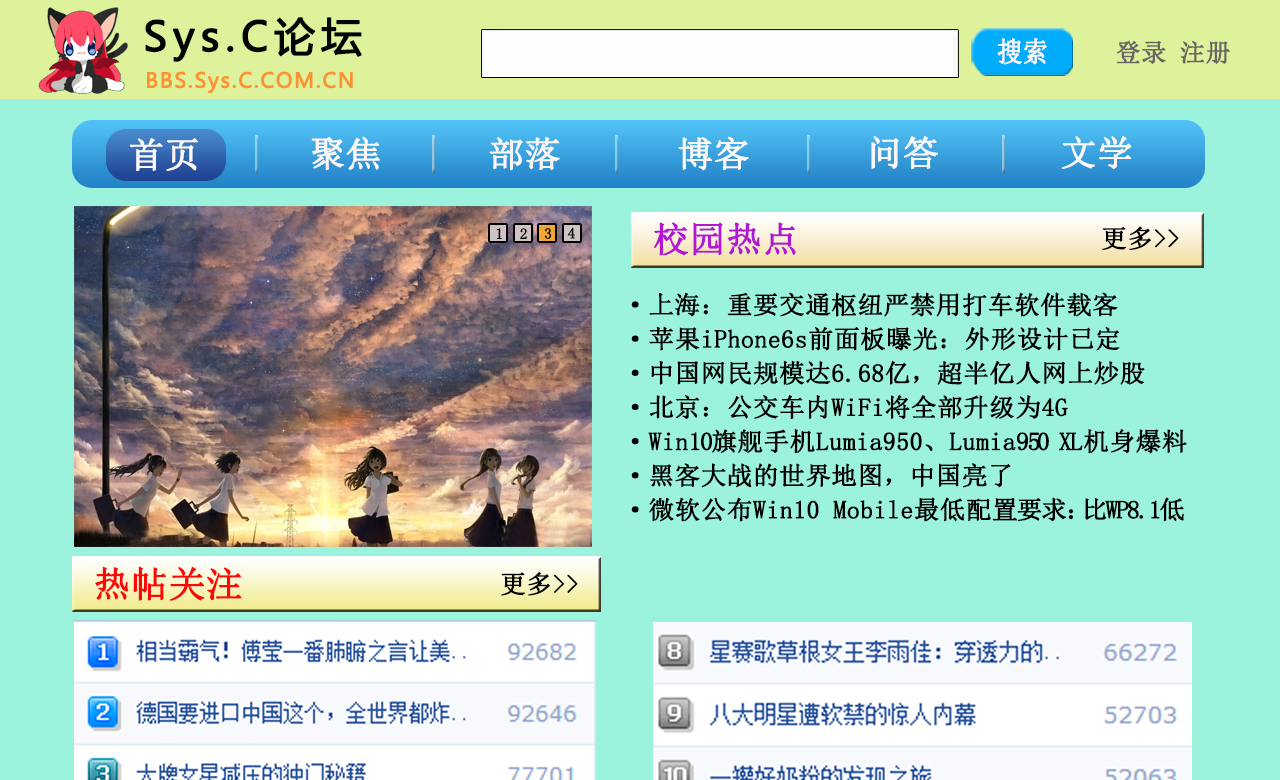
<style>
.page{position:relative;width:1280px;height:780px;background:#9bf2dd}
.page>*{position:absolute;margin:0}
.t1{font:40.2px "MicrosoftYaHei";letter-spacing:0.12em;color:#030303;font-weight:bold}
.t2{font:27.7px "SimSun";color:#fbf7f7;font-weight:bold;scale:0.91 1}
.t3{font:25px "SimSun";color:#696565;font-weight:bold}
.t4{font:20.1px "MicrosoftYaHei";letter-spacing:0.06em;color:#fd9233;font-weight:bold}
.t5{font:35.2px "SimSun";color:#fbf7f7;font-weight:bold}
.t6{font:35.2px "SimSun";color:#b218d3;font-weight:bold}
.t7{font:15.1px "SimSun";color:#010101;font-weight:bold}
.t8{font:15.1px "SimSun";color:#000000;font-weight:bold}
.t9{font:25.1px "SimSun";color:#000000;font-weight:bold}
.t10{font:25.1px/34.1px "SimSun";color:#000000;font-weight:bold}
.t11{font:25.1px/34.1px "SimSun";letter-spacing:-0.08em;color:#000000;font-weight:bold}
.t12{font:25.1px/34.1px "SimSun";letter-spacing:-0.16em;color:#000000;font-weight:bold}
.t13{font:25.1px/34.1px "SimSun";letter-spacing:-0.04em;color:#000000;font-weight:bold}
.t14{font:25.1px/34.1px "SimSun";letter-spacing:-0.06em;color:#000000;font-weight:bold}
.t15{font:25.1px/34.1px "SimSun";letter-spacing:-0.4em;color:#000000;font-weight:bold}
.t16{font:25.1px/34.1px "SimSun";letter-spacing:-0.1em;color:#000000;font-weight:bold}
.t17{font:36.2px "SimSun";color:#fd0808;font-weight:bold}
</style>
<div class="page">
<p class="t1" style="left:145px;top:17px;width:217px;height:45px">Sys.C论坛</p>
<p class="t2" style="left:997px;top:38px;width:50px;height:27px">搜索</p>
<p class="t3" style="left:1116px;top:40px;width:114px;height:24px">登录 注册</p>
<p class="t4" style="left:147px;top:71px;width:206px;height:22px">BBS.Sys.C.COM.CN</p>
<p class="t5" style="left:311px;top:136px;width:69px;height:35px">聚焦</p>
<p class="t5" style="left:489px;top:137px;width:71px;height:34px">部落</p>
<p class="t5" style="left:678px;top:136px;width:71px;height:35px">博客</p>
<p class="t5" style="left:871px;top:136px;width:67px;height:34px">问答</p>
<p class="t5" style="left:1061px;top:136px;width:71px;height:33px">文学</p>
<p class="t5" style="left:129px;top:138px;width:69px;height:34px">首页</p>
<p class="t6" style="left:653px;top:222px;width:143px;height:34px">校园热点</p>
<p class="t7" style="left:496px;top:228px;width:6px;height:11px">1</p>
<p class="t8" style="left:520px;top:228px;width:7px;height:11px">2</p>
<p class="t8" style="left:544px;top:228px;width:8px;height:11px">3</p>
<p class="t8" style="left:567px;top:227px;width:8px;height:12px">4</p>
<p class="t9" style="left:1102px;top:226px;width:77px;height:25px">更多&gt;&gt;</p>
<p class="t10" style="left:631px;top:292px;width:556px;height:230px">·上海：重要交通枢纽严禁用打车软件载客<br>·苹果iPhone6s前面板曝光：外形设计已定<br>·中国网民规模达6.68亿，超半亿人网上炒股<br>·北京：公交车内WiFi将全部升级为4G<br>·Win<span class="t11">10</span>旗舰手机Lumia950、Lumia<span class="t11">9</span><span class="t12">5</span><span class="t13">0 </span><span class="t11">X</span>L机身爆料<br>·黑客大战的世界地图，中国亮了<br>·微软公布Win10 Mobile最低配<span class="t14">置要求</span><span class="t15">：</span><span class="t16">比WP8.1</span>低</p>
<p class="t17" style="left:95px;top:566px;width:147px;height:35px">热帖关注</p>
<p class="t9" style="left:501px;top:572px;width:77px;height:24px">更多&gt;&gt;</p>
</div>
